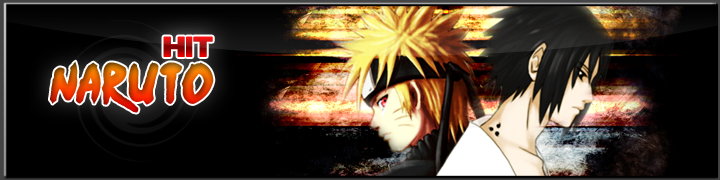
<style>
.page{position:relative;width:720px;height:180px;background:#000000}
.page>*{position:absolute;margin:0}
.t1{font:26px "BorisBlackBloxx"}
.t2{font:46px "Ninja-Naruto"}
</style>
<div class="page">
<p class="t1" style="left:163px;top:36px;width:50px;height:21px">HIT</p>
<p class="t2" style="left:50px;top:61px;width:164px;height:52px">naruto</p>
</div>
